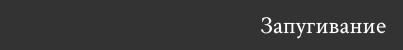
<style>
.page{position:relative;width:403px;height:50px;background:#333333}
.page>*{position:absolute;margin:0}
.t1{font:24px "CrimsonText-Regular";color:#ffffff}
</style>
<div class="page">
<p class="t1" style="left:261px;top:17px;width:125px;height:22px">Запугивание</p>
</div>
